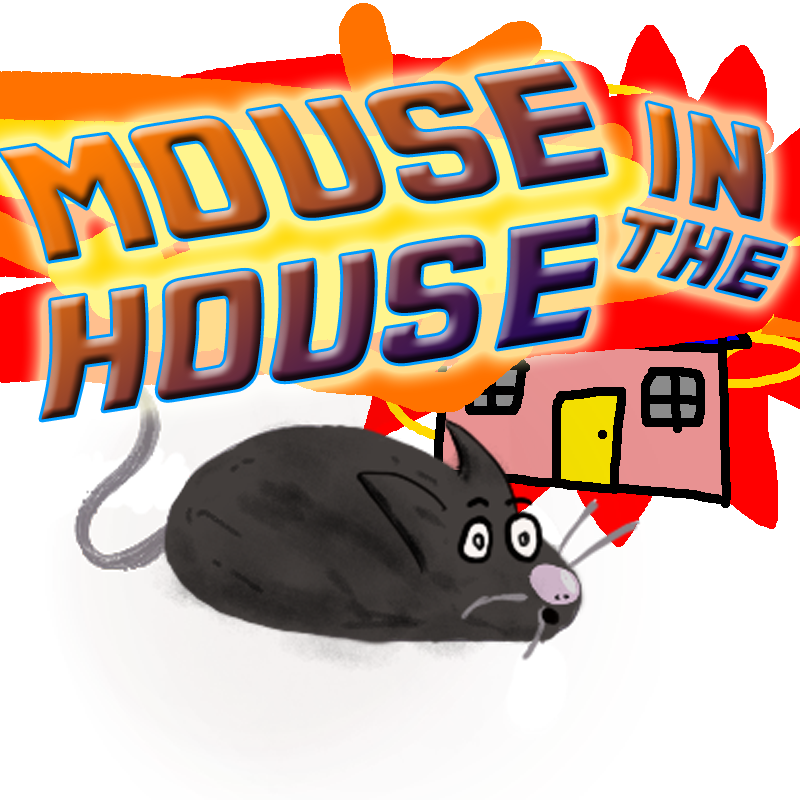
<style>
.page{position:relative;width:800px;height:800px;background:#ffffff}
.page>*{position:absolute;margin:0}
.t1{font:130.5px "Backtothefuture2002-Regular"}
.t2{font:65.1px "Backtothefuture2002-Regular"}
.t3{font:97.6px "Backtothefuture2002-Regular"}
</style>
<div class="page">
<p class="t1" style="left:0px;top:64px;width:606px;height:356px;rotate:-9deg">MOUSE<br>house</p>
<p class="t2" style="left:619px;top:103px;width:167px;height:196px;rotate:13deg"><span class="t3">IN<br></span>the</p>
</div>
